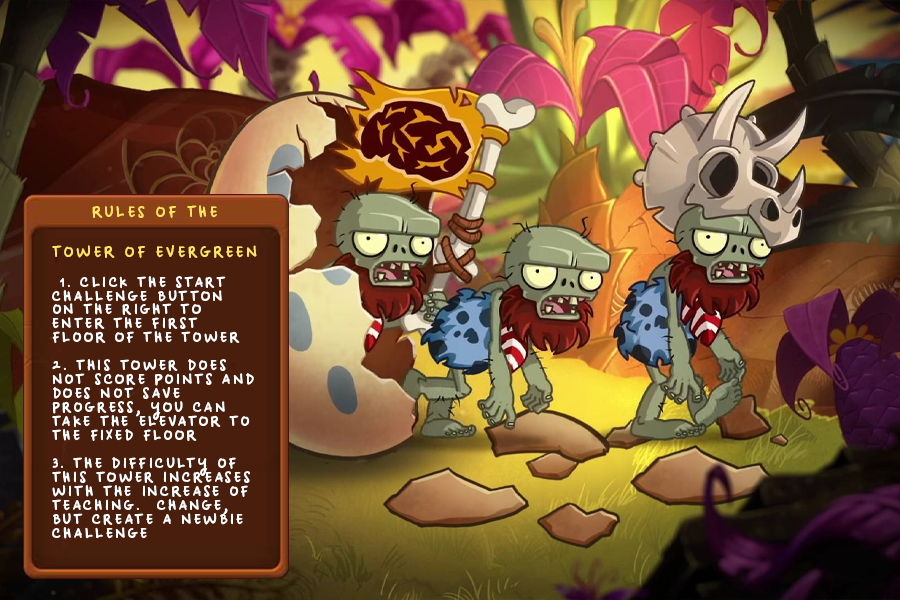
<style>
.page{position:relative;width:900px;height:600px}
.page>*{position:absolute;margin:0}
.t1{font:15.1px/40px "iCielBeCool-Regular";letter-spacing:0.17em;color:#ffe65d;text-transform:uppercase}
.t2{font:15.1px/29px "iCielBeCool-Regular";letter-spacing:0.17em;color:#ffe65d;text-transform:uppercase}
.t3{font:14px/14px "iCielBeCool-Regular";letter-spacing:0.17em;color:#ffffff;text-transform:uppercase}
</style>
<div class="page">
<p class="t1" style="left:52px;top:205px;width:205px;height:53px;text-align:center"><span class="t2">Rules of the<br></span>Tower of Evergreen</p>
<p class="t3" style="left:52px;top:276px;width:202px;height:263px">1. Click the Start Challenge button on the right to enter the first floor of the tower <br><br>2. This tower does not score points and does not save progress, you can take the elevator to the fixed floor<br> <br>3. The difficulty of this tower increases with the increase of teaching.  Change, but create a newbie challenge</p>
</div>
